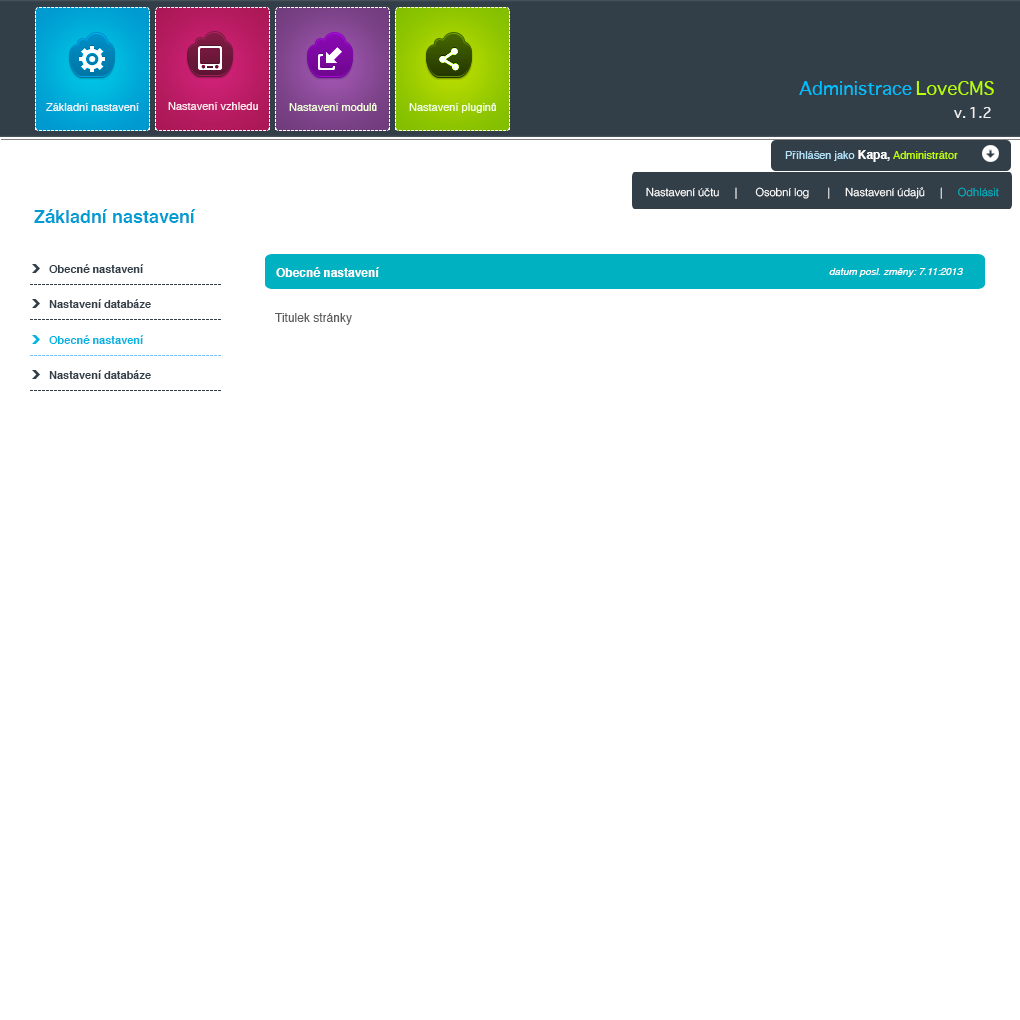
<style>
.page{position:relative;width:1020px;height:1020px;background:#ffffff}
.page>*{position:absolute;margin:0}
.t1{font:18px "Sathu";color:#00bfff}
.t2{font:18px "Sathu";color:#b7ff00}
.t3{font:11px "Helvetica";color:#ffe6f0}
.t4{font:11px "Helvetica";color:#ecfaff}
.t5{font:11px "Helvetica";color:#f3ffda}
.t6{font:14px "Sathu";color:#eeeeee}
.t7{font:11px "Helvetica";color:#b4e4fb}
.t8{font:12px "Helvetica-Bold";color:#ffffff}
.t9{font:12px "Helvetica-Bold";color:#ecf9fd}
.t10{font:11px "Helvetica";color:#beff00}
.t11{font:11px "Helvetica-Light";color:#ffffff}
.t12{font:11px "Helvetica-Light";color:#00b1c1}
.t13{font:18px "Helvetica-Bold";color:#009dd2}
.t14{font:11px "Helvetica-Bold";color:#323e48}
.t15{font:10px "Helvetica-Oblique";color:#ffffff}
.t16{font:12px "Helvetica";color:#5d5d5d}
.t17{font:11px "Helvetica-Bold";color:#01b4e2}
</style>
<div class="page">
<p class="t1" style="left:799px;top:81px;width:195px;height:14px">Administrace <span class="t2">LoveCMS</span></p>
<p class="t3" style="left:168px;top:102px;width:90px;height:8px">Nastavení vzhledu</p>
<p class="t4" style="left:46px;top:103px;width:93px;height:8px">Základní nastavení</p>
<p class="t5" style="left:289px;top:103px;width:88px;height:8px">Nastavení modulů</p>
<p class="t5" style="left:409px;top:103px;width:87px;height:10px">Nastavení pluginů</p>
<p class="t6" style="left:954px;top:107px;width:37px;height:11px">v. 1.2</p>
<p class="t7" style="left:785px;top:150px;width:173px;height:12px">Příhlášen jako <span class="t8">Kapa</span><span class="t9">,</span><span class="t10"> Administrátor</span></p>
<p class="t11" style="left:646px;top:187px;width:353px;height:12px">Nastavení účtu     |      Osobní log      |     Nastavení údajů     |  <span class="t12">   Odhlásit</span></p>
<p class="t13" style="left:34px;top:209px;width:162px;height:14px">Základní nastavení</p>
<p class="t14" style="left:49px;top:264px;width:95px;height:9px">Obecné nastavení</p>
<p class="t8" style="left:276px;top:267px;width:103px;height:10px">Obecné nastavení</p>
<p class="t15" style="left:829px;top:268px;width:134px;height:9px">datum posl. změny: 7.11:2013</p>
<p class="t14" style="left:49px;top:299px;width:102px;height:9px">Nastavení databáze</p>
<p class="t16" style="left:275px;top:313px;width:77px;height:12px">Titulek stránky</p>
<p class="t17" style="left:49px;top:335px;width:95px;height:9px">Obecné nastavení</p>
<p class="t14" style="left:49px;top:370px;width:102px;height:9px">Nastavení databáze</p>
</div>
